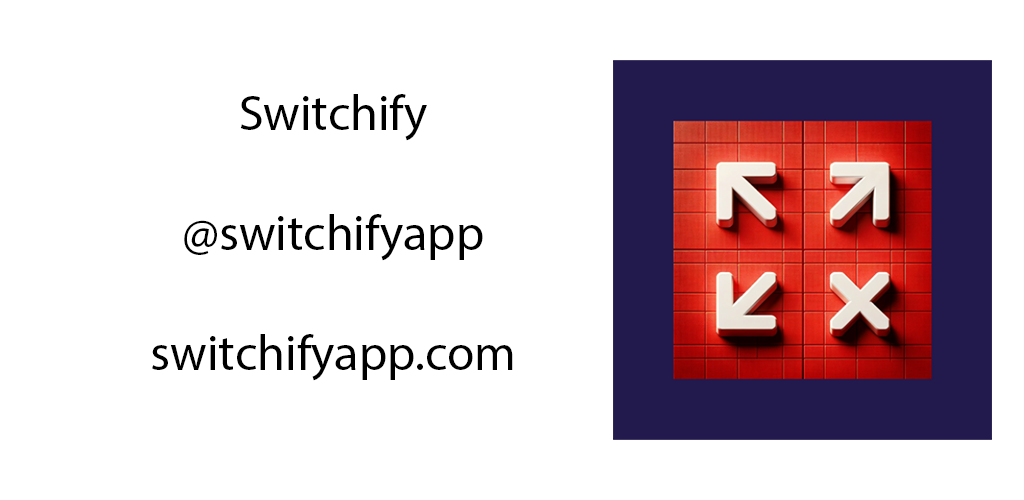
<style>
.page{position:relative;width:1024px;height:500px;background:#ffffff}
.page>*{position:absolute;margin:0}
.t1{font:50px "MyriadPro-Regular";color:#000000}
</style>
<div class="page">
<p class="t1" style="left:152px;top:94px;width:361px;height:287px;text-align:center">Switchify<br><br>@switchifyapp<br><br>switchifyapp.com</p>
</div>
